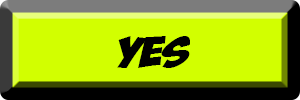
<style>
.page{position:relative;width:300px;height:100px;background:#d2ff00}
.page>*{position:absolute;margin:0}
.t1{font:42.5px "BadaBoomBB";color:#000000;scale:1.47 1}
</style>
<div class="page">
<p class="t1" style="left:117px;top:36px;width:73px;height:32px">YES</p>
</div>
